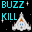
<style>
.page{position:relative;width:32px;height:32px;background:#000000}
.page>*{position:absolute;margin:0}
.t1{font:9.7px "MyriadPro-Regular";color:#12eef6}
</style>
<div class="page">
<p class="t1" style="left:2px;top:1px;width:22px;height:19px">BUZZ<br>KILL</p>
</div>
